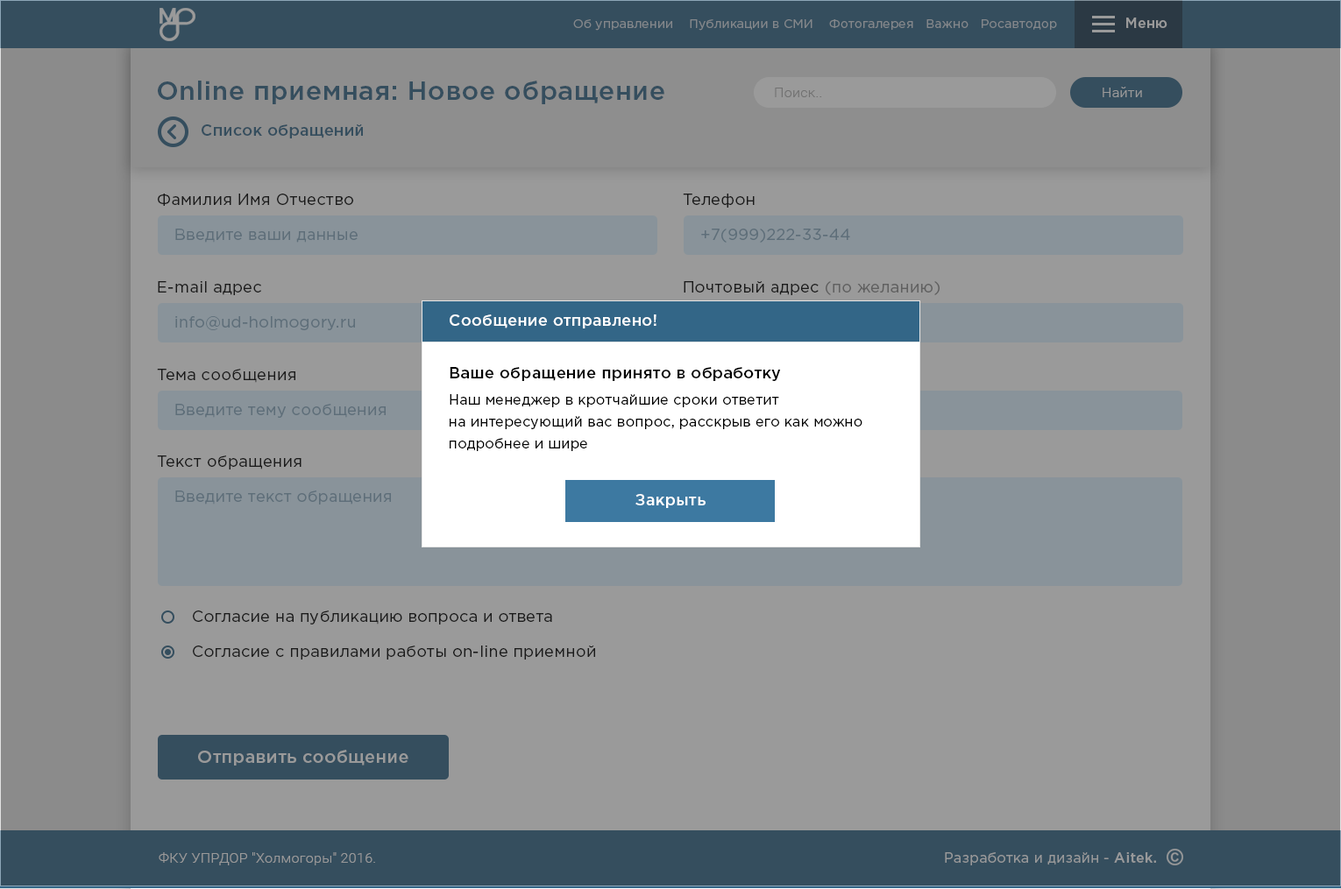
<style>
.page{position:relative;width:1341px;height:889px;background:#9a9a9a}
.page>*{position:absolute;margin:0}
.t1{font:14px "GothamPro-Medium";letter-spacing:0.02em;color:#9a9a9a}
.t2{font:12.3px "GothamPro";letter-spacing:0.02em;color:#83878b}
.t3{font:26.3px "GothamPro-Medium";letter-spacing:0.02em;color:#354e5e}
.t4{font:14px "Roboto-Light";letter-spacing:0.02em;color:#717171}
.t5{font:14px "Roboto-Light";letter-spacing:0.02em;color:#9a9a9a}
.t6{font:15.8px "GothamPro-Medium";letter-spacing:0.02em;color:#354e5e}
.t7{font:15.8px "GothamPro";letter-spacing:0.02em;color:#1b1b1b}
.t8{font:15.8px "GothamPro";letter-spacing:0.02em;color:#5e6e79}
.t9{font:15.8px "GothamPro";letter-spacing:0.02em}
.t10{font:15.8px "GothamPro-Medium";letter-spacing:0.02em;color:#ffffff}
.t11{font:15.8px "GothamPro-Medium";letter-spacing:0.02em;color:#000000}
.t12{font:14px/21.9px "GothamPro";letter-spacing:0.02em;color:#000000}
.t13{font:17.5px "GothamPro-Medium";letter-spacing:0.02em;color:#9a9a9a}
.t14{font:14px "GothamPro";letter-spacing:0.02em;color:#98999a}
.t15{font:14px "GothamPro-Medium";letter-spacing:0.02em;color:#98999a}
</style>
<div class="page">
<p class="t1" style="left:1126px;top:18px;width:41px;height:10px">Меню</p>
<p class="t2" style="left:573px;top:19px;width:484px;height:12px">Об управлении    Публикации в СМИ    Фотогалерея   Важно   Росавтодор</p>
<p class="t3" style="left:158px;top:81px;width:506px;height:23px">Online приемная: Новое обращение</p>
<p class="t4" style="left:775px;top:88px;width:47px;height:9px">Поиск..</p>
<p class="t5" style="left:1102px;top:87px;width:40px;height:10px">Найти</p>
<p class="t6" style="left:202px;top:124px;width:161px;height:14px">Список обращений</p>
<p class="t7" style="left:158px;top:194px;width:195px;height:12px">Фамилия Имя Отчество</p>
<p class="t7" style="left:683px;top:194px;width:71px;height:14px">Телефон</p>
<p class="t8" style="left:175px;top:229px;width:183px;height:14px">Введите ваши данные</p>
<p class="t8" style="left:701px;top:229px;width:149px;height:14px">+7(999)222-33-44</p>
<p class="t7" style="left:158px;top:281px;width:103px;height:14px">E-mail адрес</p>
<p class="t9" style="left:683px;top:281px;width:256px;height:14px">Почтовый адрес (по желанию)</p>
<p class="t8" style="left:175px;top:316px;width:180px;height:14px">info@ud-holmogory.ru</p>
<p class="t10" style="left:450px;top:315px;width:206px;height:14px">Сообщение отправлено!</p>
<p class="t7" style="left:157px;top:369px;width:138px;height:14px">Тема сообщения</p>
<p class="t11" style="left:450px;top:367px;width:331px;height:14px">Ваше обращение принято в обработку</p>
<p class="t12" style="left:450px;top:394px;width:412px;height:57px">Наш менеджер в кротчайшие сроки ответит <br>на интересующий вас вопрос, расскрыв его как можно<br>подробнее и шире</p>
<p class="t8" style="left:175px;top:404px;width:211px;height:14px">Введите тему сообщения</p>
<p class="t7" style="left:157px;top:456px;width:144px;height:14px">Текст обращения</p>
<p class="t8" style="left:175px;top:491px;width:216px;height:14px">Введите текст обращения</p>
<p class="t10" style="left:635px;top:494px;width:70px;height:14px">Закрыть</p>
<p class="t7" style="left:193px;top:611px;width:359px;height:14px">Согласие на публикацию вопроса и ответа</p>
<p class="t7" style="left:193px;top:646px;width:402px;height:14px">Согласие с правилами работы on-line приемной</p>
<p class="t13" style="left:198px;top:750px;width:210px;height:16px">Отправить сообщение</p>
<p class="t5" style="left:159px;top:853px;width:216px;height:13px">ФКУ УПРДОР "Холмогоры" 2016.</p>
<p class="t14" style="left:945px;top:853px;width:211px;height:13px">Разработка и дизайн - <span class="t15">Aitek.</span></p>
</div>
